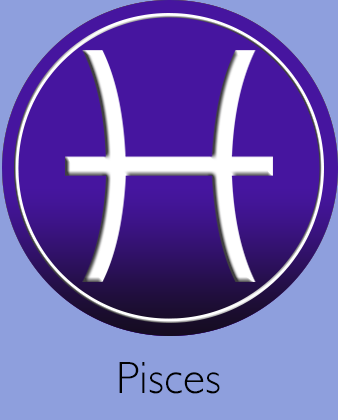
<style>
.page{position:relative;width:338px;height:420px;background:#8e9fdd}
.page>*{position:absolute;margin:0}
.t1{font:45.5px "GillSans-Light";color:#000000}
</style>
<div class="page">
<p class="t1" style="left:119px;top:362px;width:101px;height:32px">Pisces</p>
</div>
